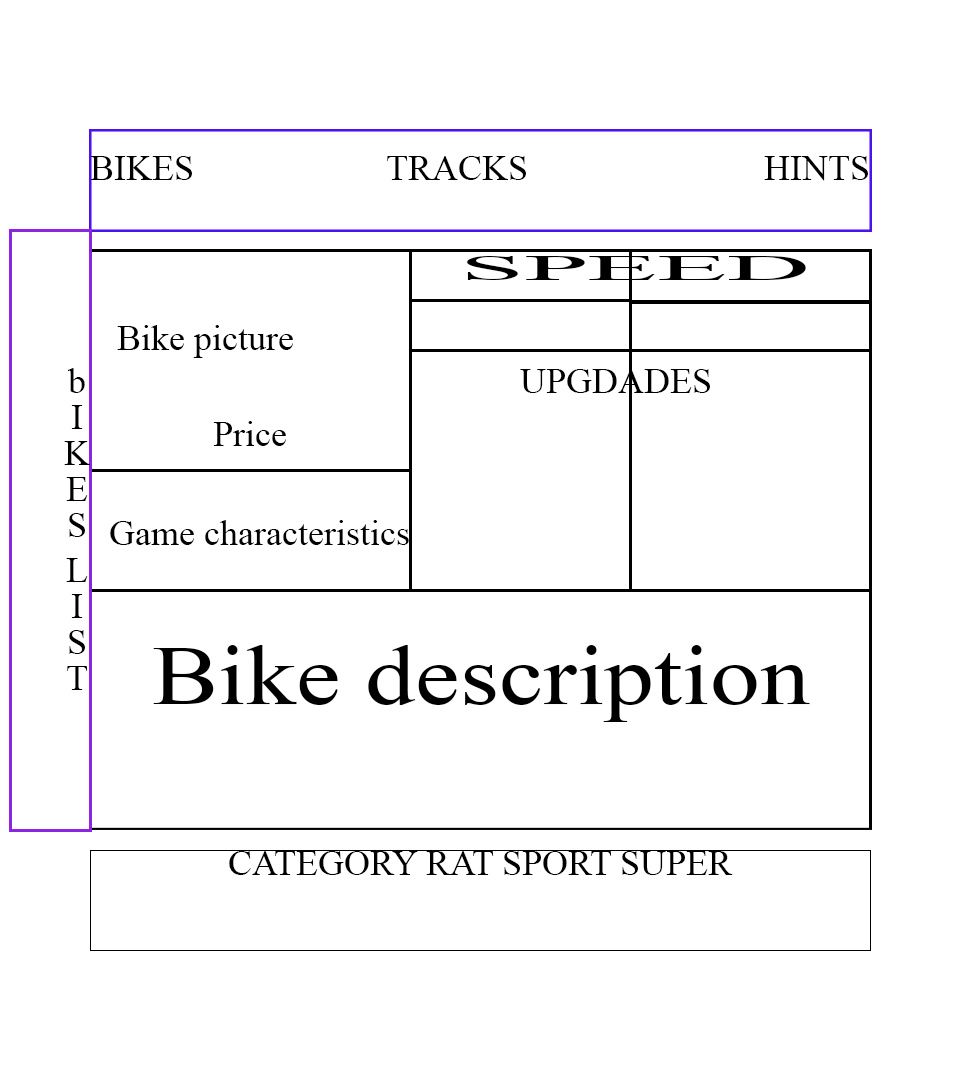
<style>
.page{position:relative;width:960px;height:1080px;background:#ffffff}
.page>*{position:absolute;margin:0}
.t1{font:36px "TimesNewRomanPSMT";color:#000000}
.t2{font:36px "TimesNewRomanPSMT";color:#000000;scale:3.18 1}
.t3{font:85.2px "TimesNewRomanPSMT";color:#000000;scale:1.17 1}
</style>
<div class="page">
<p class="t1" style="left:90px;top:156px;width:778px;height:25px">BIKES       TRACKS     HINTS</p>
<p class="t2" style="left:467px;top:256px;width:339px;height:24px">SPEED</p>
<p class="t1" style="left:117px;top:325px;width:176px;height:33px">Bike picture</p>
<p class="t1" style="left:64px;top:368px;width:26px;height:322px;text-align:center">bIKES LIST</p>
<p class="t1" style="left:520px;top:369px;width:190px;height:24px">UPGDADES</p>
<p class="t1" style="left:213px;top:421px;width:73px;height:25px">Price</p>
<p class="t1" style="left:110px;top:520px;width:299px;height:25px">Game characteristics</p>
<p class="t3" style="left:153px;top:645px;width:657px;height:77px">Bike description</p>
<p class="t1" style="left:229px;top:851px;width:504px;height:24px">CATEGORY RAT SPORT SUPER</p>
</div>
